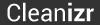
<style>
.page{position:relative;width:100px;height:25px;background:#333333}
.page>*{position:absolute;margin:0}
.t1{font:24px "Roboto-Regular";color:#ffffff}
.t2{font:24px "Roboto-Bold";color:#ffffff}
</style>
<div class="page">
<p class="t1" style="left:7px;top:2px;width:87px;height:20px">Clean<span class="t2">izr</span></p>
</div>
